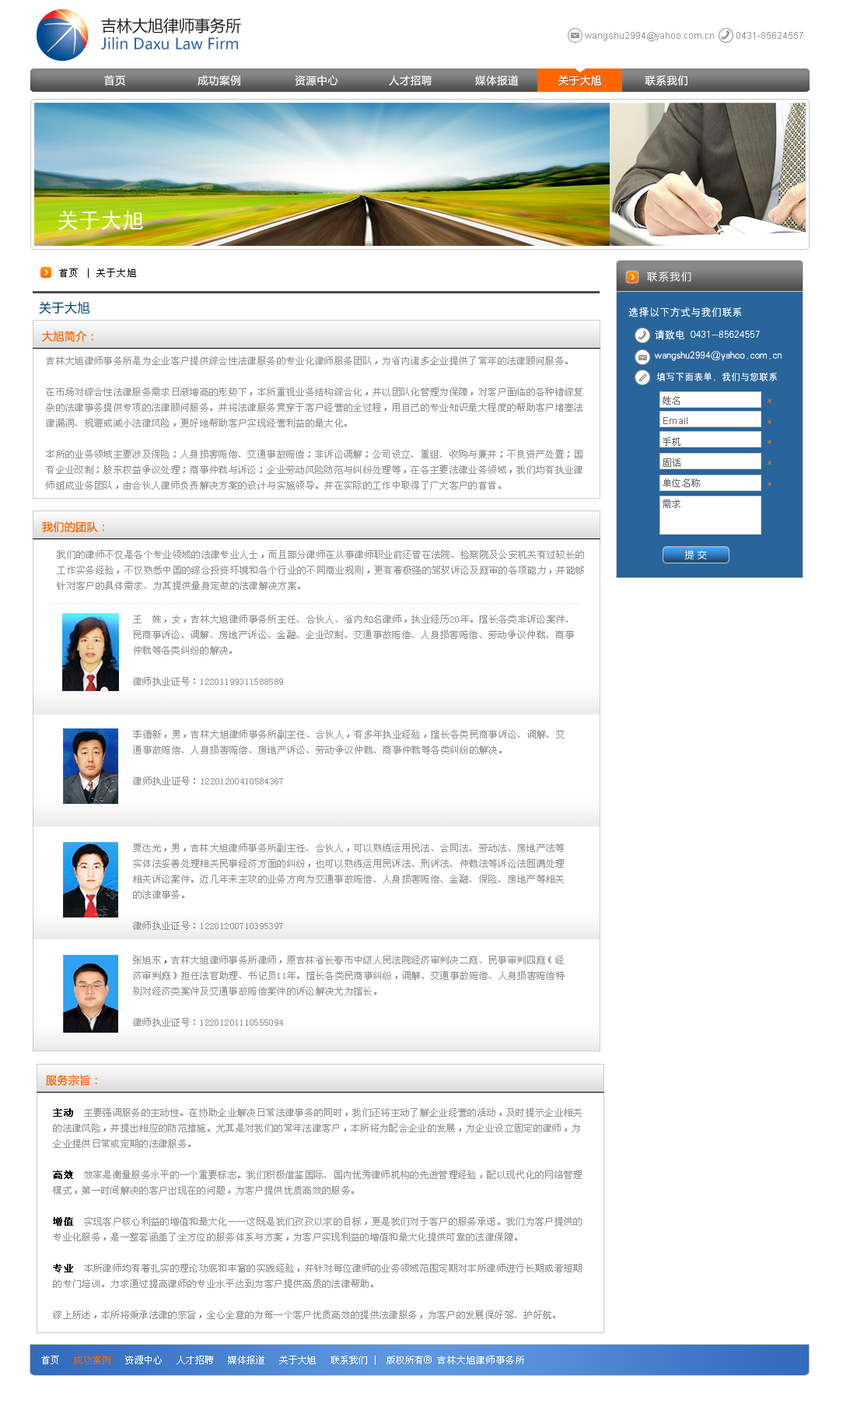
<style>
.page{position:relative;width:843px;height:1414px;background:#ffffff}
.page>*{position:absolute;margin:0}
.t1{font:15.2px "MicrosoftYaHei";color:#3562ae}
.t2{font:15.6px "MicrosoftYaHei";color:#231f20}
.t3{font:9.3px "ArialMT";color:#989898}
.t4{font:10.4px "MicrosoftYaHei";letter-spacing:0.05em;color:#fffefe}
.t5{font:21.8px "SimHei";color:#ffffff}
.t6{font:9.3px "SimSun";letter-spacing:0.1em;color:#000000}
.t7{font:10.4px "MicrosoftYaHei";letter-spacing:0.1em;color:#ffffff}
.t8{font:12.4px "MicrosoftYaHei";letter-spacing:0.029em;color:#004378}
.t9{font:10.4px/22.8px "HYg2gj";color:#ffffff}
.t10{font:10.4px/20.7px "HYg2gj";color:#ffffff}
.t11{font:9.3px/20.7px "HYg2gj";color:#ffffff}
.t12{font:10.9px "MicrosoftYaHei";letter-spacing:0.029em;color:#ff6600}
.t13{font:9.3px/15.6px "SimSun";letter-spacing:0.029em;color:#909090}
.t14{font:9.3px/20.7px "SimSun";letter-spacing:0.029em;color:#666666}
.t15{font:9.3px/20.7px "ArialMT";letter-spacing:0.029em;color:#666666}
.t16{font:9.3px/20.7px "SimSun";letter-spacing:0.029em;color:#ff6500}
.t17{font:9.3px "MicrosoftYaHei";letter-spacing:0.029em;color:#ffffff}
.t18{font:9.3px/15.6px "SimSun";letter-spacing:0.029em;color:#666666}
.t19{font:9.3px/15.6px "SimSun";letter-spacing:0.029em;color:#000000;font-weight:bold}
.t20{font:9.3px "SimSun";color:#ffffff}
.t21{font:9.3px "SimSun";color:#ff6500}
.t22{font:10.4px "ArialMT";color:#ffffff}
.t23{font:9.3px "SimSun";letter-spacing:0.05em;color:#ffffff}
</style>
<div class="page">
<p class="t1" style="left:101px;top:18px;width:140px;height:32px"><span class="t2">吉林大旭律师事务所<br></span>Jilin Daxu Law Firm</p>
<p class="t3" style="left:585px;top:32px;width:219px;height:9px">wangshu2994@yahoo.com.cn         0431-85624557</p>
<p class="t4" style="left:104px;top:75px;width:584px;height:11px">首页                    成功案例               资源中心              人才招聘            媒体报道           关于大旭            联系我们</p>
<p class="t4" style="left:104px;top:75px;width:584px;height:11px">首页                    成功案例               资源中心              人才招聘            媒体报道           关于大旭            联系我们</p>
<p class="t5" style="left:58px;top:210px;width:85px;height:20px">关于大旭</p>
<p class="t6" style="left:59px;top:268px;width:77px;height:10px">首页 | 关于大旭</p>
<p class="t7" style="left:647px;top:272px;width:45px;height:10px">联系我们</p>
<p class="t7" style="left:647px;top:272px;width:45px;height:10px">联系我们</p>
<p class="t8" style="left:39px;top:301px;width:51px;height:13px">关于大旭</p>
<p class="t9" style="left:629px;top:307px;width:153px;height:74px">选择以下方式与我们联系<br>     请致电 0431-85624557<br><span class="t10">     wangshu2994@yahoo.com.cn<br></span><span class="t11">      填写下面表单，我们与您联系</span></p>
<p class="t9" style="left:629px;top:307px;width:153px;height:74px">选择以下方式与我们联系<br>     请致电 0431-85624557<br><span class="t10">     wangshu2994@yahoo.com.cn<br></span><span class="t11">      填写下面表单，我们与您联系</span></p>
<p class="t12" style="left:42px;top:331px;width:51px;height:11px">大旭简介：</p>
<p class="t13" style="left:46px;top:356px;width:537px;height:133px">吉林大旭律师事务所是为企业客户提供综合性法律服务的专业化律师服务团队，为省内诸多企业提供了常年的法律顾问服务。<br><br>在市场对综合性法律服务需求日渐增高的形势下，本所重视业务结构综合化，并以团队化管理为保障，对客户面临的各种错综复杂的法律事务提供专项的法律顾问服务。并将法律服务贯穿于客户经营的全过程，用自己的专业知识最大程度的帮助客户堵塞法律漏洞、规避或减小法律风险，更好地帮助客户实现经营利益的最大化。<br><br>本所的业务领域主要涉及保险；人身损害赔偿、交通事故赔偿；非诉讼调解；公司设立、重组、收购与兼并；不良资产处置；国有企业改制；股东权益争议处理；商事仲裁与诉讼；企业劳动风险防范与纠纷处理等，在各主要法律业务领域，我们均有执业律师组成业务团队，由合伙人律师负责解决方案的设计与实施领导。并在实际的工作中取得了广大客户的首肯。</p>
<p class="t14" style="left:663px;top:396px;width:37px;height:112px">姓名<br><span class="t15">Email<br></span>手机<br>固话<br>单位名称<br>需求</p>
<p class="t16" style="left:768px;top:398px;width:4px;height:88px">*<br>*<br>*<br>*<br>*</p>
<p class="t12" style="left:42px;top:521px;width:62px;height:11px">我们的团队：</p>
<p class="t13" style="left:57px;top:550px;width:527px;height:40px">我们的律师不仅是各个专业领域的法律专业人士，而且部分律师在从事律师职业前还曾在法院、检察院及公安机关有过较长的工作实务经验，不仅熟悉中国的综合投资环境和各个行业的不同商业规则，更有着极强的驾驭诉讼及庭审的各项能力，并能够针对客户的具体需求、为其提供量身定做的法律解决方案。</p>
<p class="t17" style="left:685px;top:550px;width:22px;height:9px">提 交</p>
<p class="t13" style="left:133px;top:615px;width:441px;height:70px">王  姝，女，吉林大旭律师事务所主任、合伙人、省内知名律师，执业经历20年。擅长各类非诉讼案件、民商事诉讼、调解、房地产诉讼、金融、企业改制、交通事故赔偿、人身损害赔偿、劳动争议仲裁、商事仲裁等各类纠纷的解决。<br><br>律师执业证号：12201199311588589</p>
<p class="t13" style="left:133px;top:730px;width:432px;height:55px">李德新，男，吉林大旭律师事务所副主任、合伙人，有多年执业经验，擅长各类民商事诉讼、调解、交通事故赔偿、人身损害赔偿、房地产诉讼、劳动争议仲裁、商事仲裁等各类纠纷的解决。<br><br>律师执业证号：12201200410584367</p>
<p class="t13" style="left:133px;top:843px;width:431px;height:87px">贾达光，男，吉林大旭律师事务所副主任、合伙人，可以熟练运用民法、合同法、劳动法、房地产法等实体法妥善处理相关民事经济方面的纠纷，也可以熟练运用民诉法、刑诉法、仲裁法等诉讼法圆满处理相关诉讼案件。近几年来主攻的业务方向为交通事故赔偿、人身损害赔偿、金融、保险、房地产等相关的法律事务。<br><br>律师执业证号：12201200710395397</p>
<p class="t13" style="left:133px;top:955px;width:432px;height:71px">张旭东<span class="t18">，</span>吉林大旭律师事务所律师，原吉林省长春市中级人民法院经济审判决二庭、民事审判四庭（经济审判庭）担任法官助理、书记员11年。擅长各类民商事纠纷，调解、交通事故赔偿、人身损害赔偿特别对经济类案件及交通事故赔偿案件的诉讼解决尤为擅长。<br><br>律师执业证号：12201201110555094</p>
<p class="t12" style="left:46px;top:1075px;width:51px;height:10px">服务宗旨：</p>
<p class="t13" style="left:53px;top:1108px;width:529px;height:211px"><span class="t19">主动</span>  主要强调服务的主动性。在协助企业解决日常法律事务的同时，我们还将主动了解企业经营的活动，及时提示企业相关的法律风险，并提出相应的防范措施。尤其是对我们的常年法律客户，本所将为配合企业的发展，为企业设立固定的律师，为企业提供日常或定期的法律服务。<br><br><span class="t19">高效</span>  效率是衡量服务水平的一个重要标志。我们积极借鉴国际、国内优秀律师机构的先进管理经验，配以现代化的网络管理模式，第一时间解决的客户出现在的问题，为客户提供优质高效的服务。<br><br><span class="t19">增值</span>  实现客户核心利益的增值和最大化——这既是我们孜孜以求的目标，更是我们对于客户的服务承诺。我们为客户提供的专业化服务，是一整套涵盖了全方位的服务体系与方案，为客户实现利益的增值和最大化提供可靠的法律保障。<br><br><span class="t19">专业</span>  本所律师均有着扎实的理论功底和丰富的实践经验，并针对每位律师的业务领域范围定期对本所律师进行长期或者短期的专门培训。力求通过提高律师的专业水平达到为客户提供高质的法律帮助。<br><br>综上所述，本所将秉承法律的宗旨，全心全意的为每一个客户优质高效的提供法律服务，为客户的发展保好驾、护好航。</p>
<p class="t20" style="left:41px;top:1355px;width:483px;height:10px">首页   <span class="t21">成功案例 </span>  资源中心   人才招聘   媒体报道   关于大旭   联系我们 |  版权所有<span class="t22">® </span><span class="t23">吉林大旭律师事务所</span></p>
</div>
